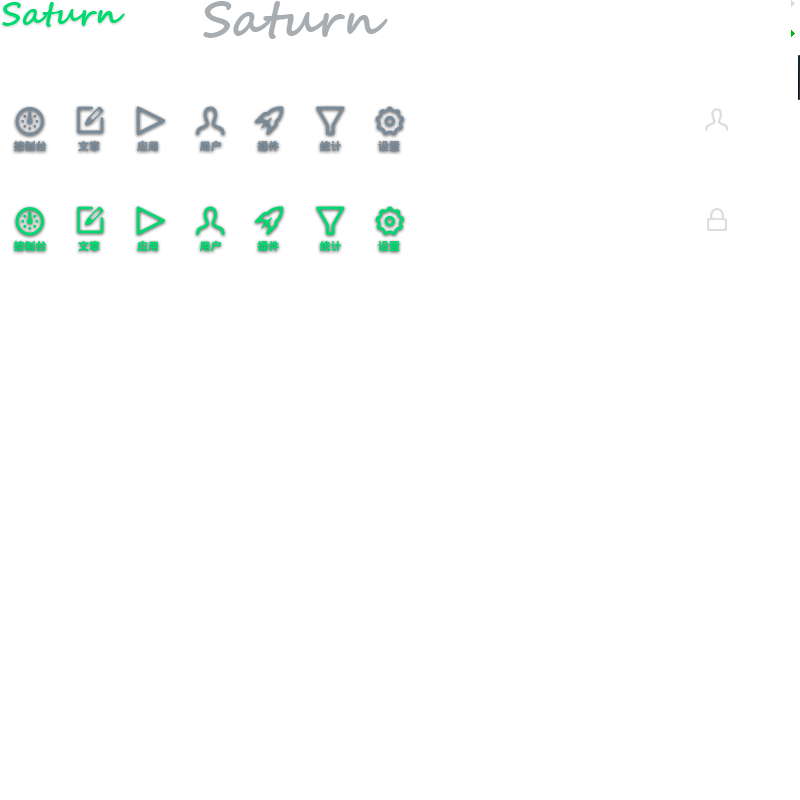
<style>
.page{position:relative;width:800px;height:800px;background:#ffffff}
.page>*{position:absolute;margin:0}
.t1{font:32px "SegoeScript-Bold";color:#00d970}
.t2{font:48px "SegoeScript-Bold";color:#a7adb1}
.t3{font:11px "DFYuanHKW9";color:#798a99}
.t4{font:11px "DFYuanHKW9";color:#00d970}
</style>
<div class="page">
<p class="t1" style="left:2px;top:2px;width:123px;height:25px">Saturn</p>
<p class="t2" style="left:203px;top:1px;width:185px;height:38px">Saturn</p>
<p class="t3" style="left:13px;top:140px;width:387px;height:12px">控制台         文章         应用            用户         插件         统计         设置</p>
<p class="t4" style="left:13px;top:240px;width:387px;height:12px">控制台         文章         应用            用户         插件         统计         设置</p>
</div>
